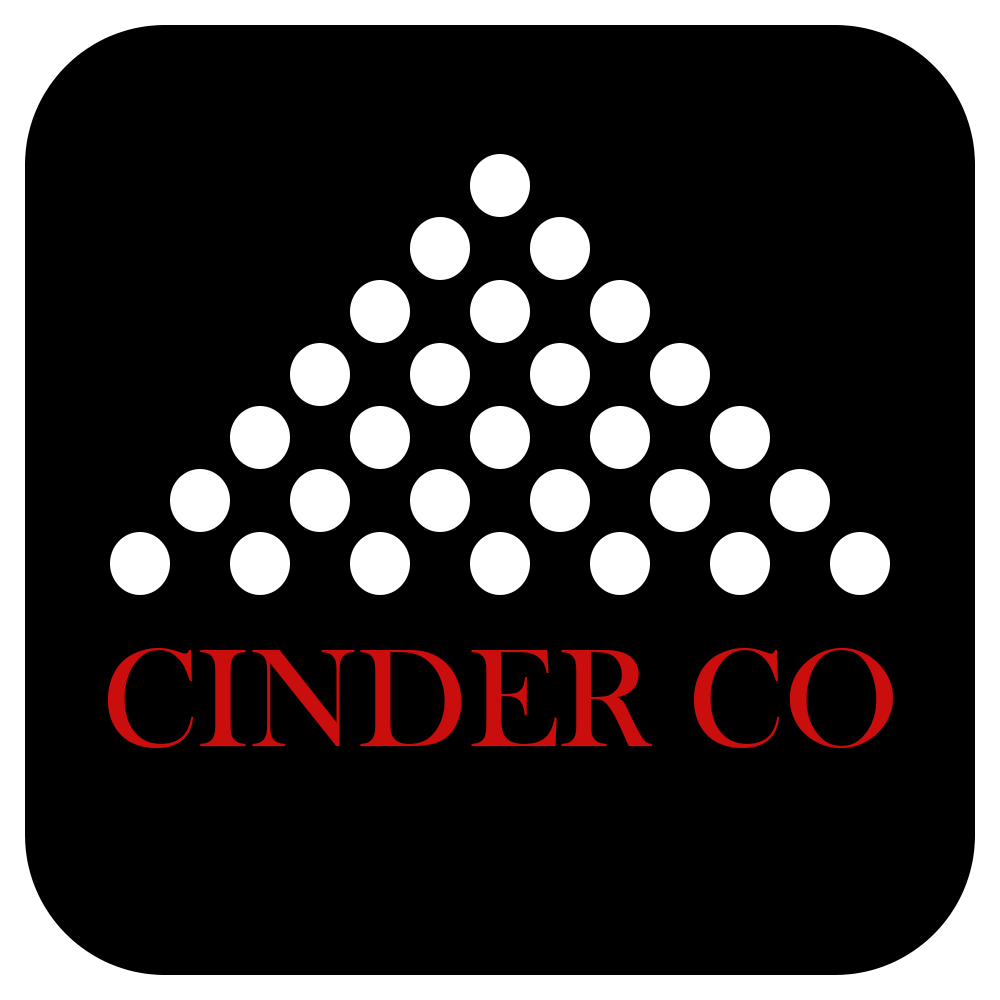
<style>
.page{position:relative;width:1000px;height:1000px;background:#000000}
.page>*{position:absolute;margin:0}
.t1{font:143.8px "BaskOldFace";color:#ca0d0d}
</style>
<div class="page">
<p class="t1" style="left:108px;top:648px;width:785px;height:100px">CINDER CO</p>
</div>
